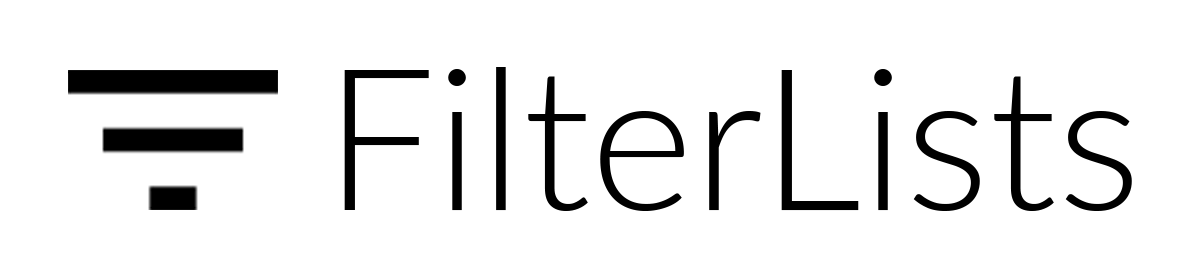
<style>
.page{position:relative;width:1200px;height:280px;background:#ffffff}
.page>*{position:absolute;margin:0}
.t1{font:197.8px "Lato-Light";color:#000000}
</style>
<div class="page">
<p class="t1" style="left:344px;top:67px;width:788px;height:144px">FilterLists</p>
</div>
